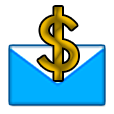
<style>
.page{position:relative;width:114px;height:114px;background:#ffffff}
.page>*{position:absolute;margin:0}
.t1{font:47px "OratorStd"}
</style>
<div class="page">
<p class="t1" style="left:38px;top:7px;width:40px;height:73px">$</p>
</div>
